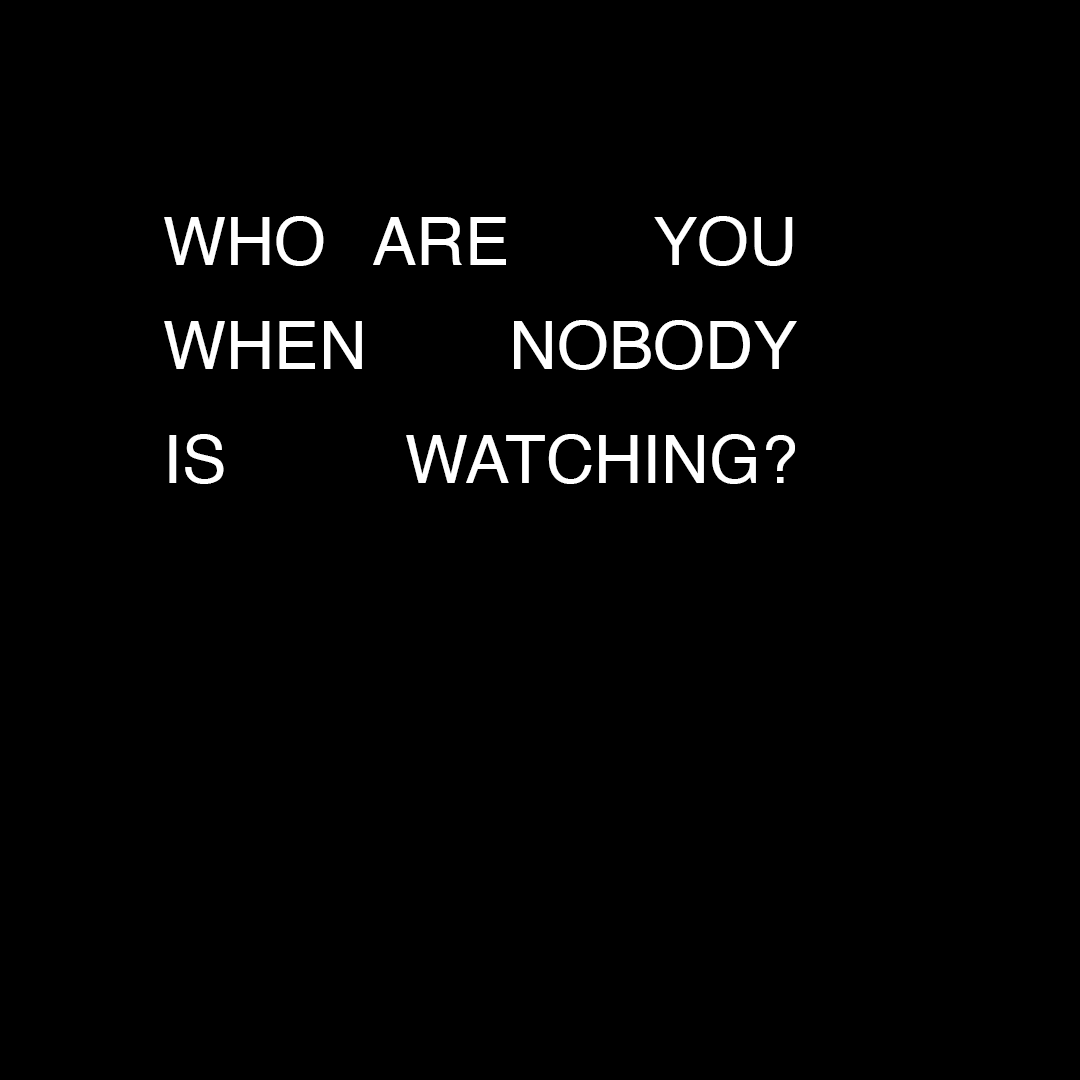
<style>
.page{position:relative;width:1080px;height:1080px;background:#000000}
.page>*{position:absolute;margin:0}
.t1{font:66.7px "Helvetica";color:#ffffff}
</style>
<div class="page">
<p class="t1" style="left:164px;top:216px;width:160px;height:50px">WHO</p>
<p class="t1" style="left:373px;top:217px;width:133px;height:48px">ARE</p>
<p class="t1" style="left:654px;top:216px;width:139px;height:50px">YOU</p>
<p class="t1" style="left:164px;top:321px;width:198px;height:48px">WHEN</p>
<p class="t1" style="left:514px;top:320px;width:283px;height:50px">NOBODY</p>
<p class="t1" style="left:169px;top:434px;width:55px;height:50px">IS</p>
<p class="t1" style="left:406px;top:434px;width:389px;height:50px">WATCHING?</p>
</div>
